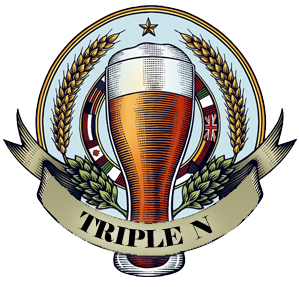
<style>
.page{position:relative;width:299px;height:287px;background:#ffffff}
.page>*{position:absolute;margin:0}
.t1{font:24px "Elephant-Regular";color:#000000}
</style>
<div class="page">
<p class="t1" style="left:78px;top:211px;width:135px;height:37px">TRIPLE  N</p>
</div>
